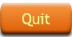
<style>
.page{position:relative;width:72px;height:37px}
.page>*{position:absolute;margin:0}
.t1{font:15px "TrebuchetMS";color:#f9f592}
</style>
<div class="page">
<p class="t1" style="left:22px;top:13px;width:28px;height:14px">Quit</p>
</div>
